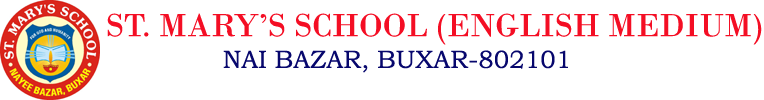
<style>
.page{position:relative;width:764px;height:100px;background:#ffffff}
.page>*{position:absolute;margin:0}
.t1{font:33.3px "BodoniMT";color:#f40e24}
.t2{font:25px "BookmanOldStyle";color:#07076d}
</style>
<div class="page">
<p class="t1" style="left:107px;top:13px;width:655px;height:32px">ST. MARY’S SCHOOL (ENGLISH MEDIUM)</p>
<p class="t2" style="left:223px;top:50px;width:345px;height:23px">NAI BAZAR, BUXAR-802101</p>
</div>
